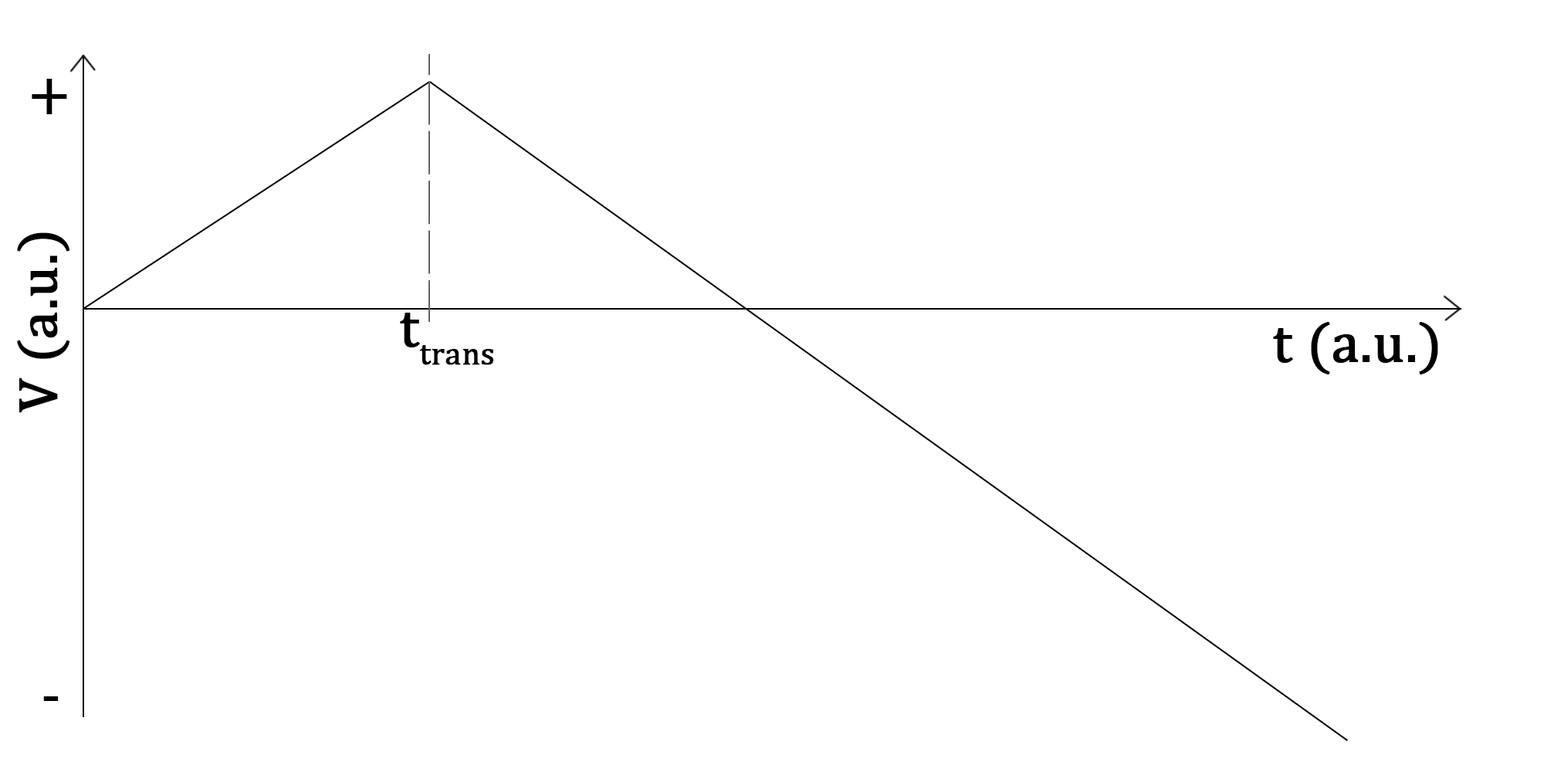
<style>
.page{position:relative;width:1544px;height:772px;background:#ffffff}
.page>*{position:absolute;margin:0}
.t1{font:55.6px "CambriaMath";color:#000000;font-weight:bold}
</style>
<div class="page">
<p class="t1" style="left:32px;top:79px;width:35px;height:622px">+<br><br><br><br><br><br><br><br><br> -</p>
<p class="t1" style="left:17px;top:232px;width:52px;height:181px;rotate:-90deg">V (a.u.)</p>
<p class="t1" style="left:400px;top:313px;width:94px;height:52px">ttrans</p>
<p class="t1" style="left:1273px;top:322px;width:166px;height:52px">t (a.u.)</p>
</div>
